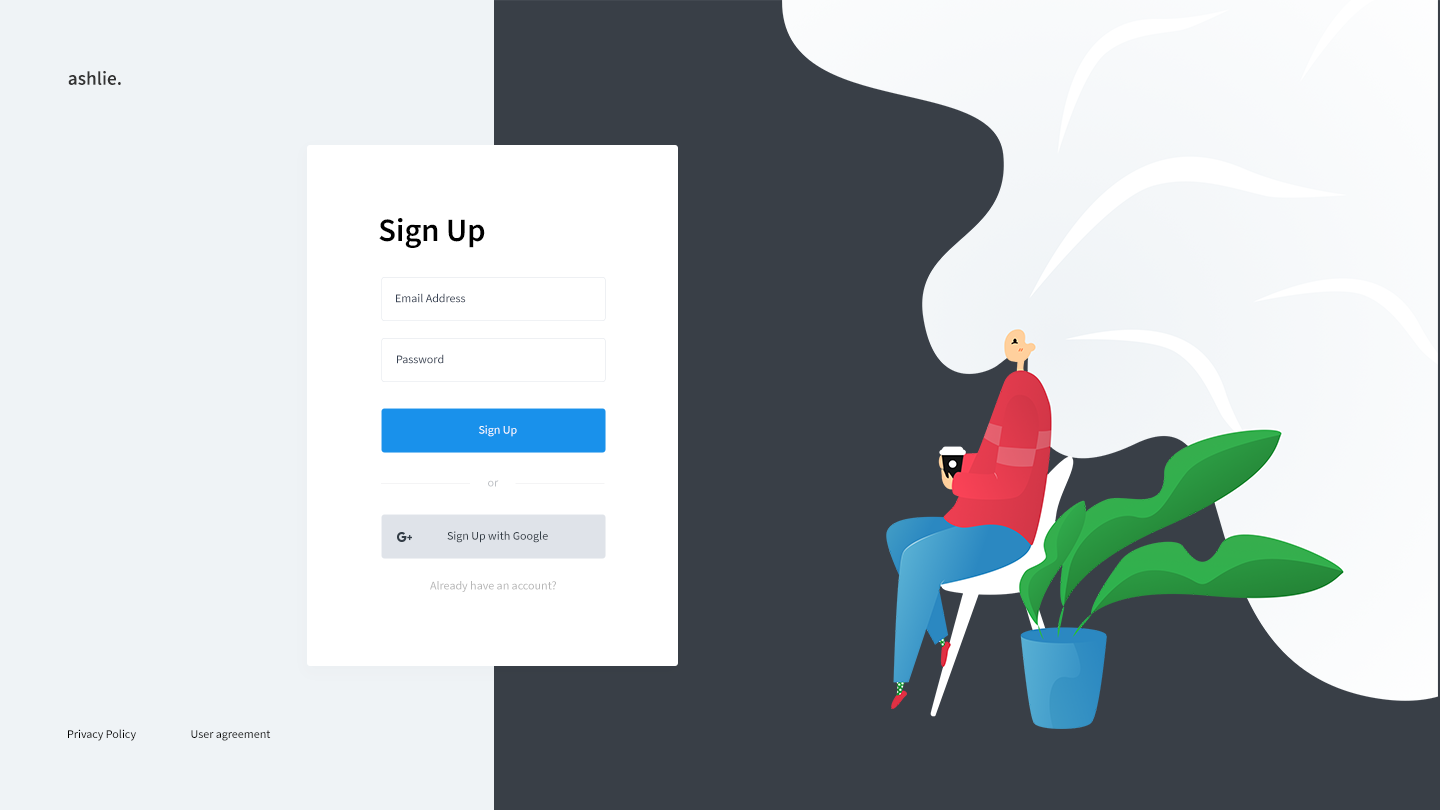
<style>
.page{position:relative;width:1440px;height:810px;background:#393f47}
.page>*{position:absolute;margin:0}
.t1{font:19.3px "SourceSansPro-SemiBold";color:#333333}
.t2{font:32.5px "SourceSansPro-SemiBold";color:#000000}
.t3{font:12px "SourceSansPro-Regular";color:#354052}
.t4{font:12px "SourceSansPro-Regular";color:#ffffff}
.t5{font:12px "SourceSansPro-Regular";color:#bdc0c4}
.t6{font:12px "SourceSansPro-Regular";color:#333d46}
.t7{font:12px "SourceSansPro-Regular";color:#b6b6b6}
.t8{font:12px "SourceSansPro-Regular";color:#000000}
</style>
<div class="page">
<p class="t1" style="left:68px;top:71px;width:53px;height:14px">ashlie.</p>
<p class="t2" style="left:379px;top:218px;width:106px;height:30px">Sign Up</p>
<p class="t3" style="left:396px;top:293px;width:70px;height:10px">Email Address</p>
<p class="t3" style="left:397px;top:354px;width:47px;height:10px">Password</p>
<p class="t4" style="left:479px;top:425px;width:38px;height:12px">Sign Up</p>
<p class="t5" style="left:488px;top:480px;width:11px;height:7px">or</p>
<p class="t6" style="left:447px;top:531px;width:101px;height:12px">Sign Up with Google</p>
<p class="t7" style="left:430px;top:581px;width:126px;height:11px">Already have an account?</p>
<p class="t8" style="left:68px;top:729px;width:68px;height:12px">Privacy Policy</p>
<p class="t8" style="left:191px;top:730px;width:80px;height:11px">User agreement</p>
</div>
